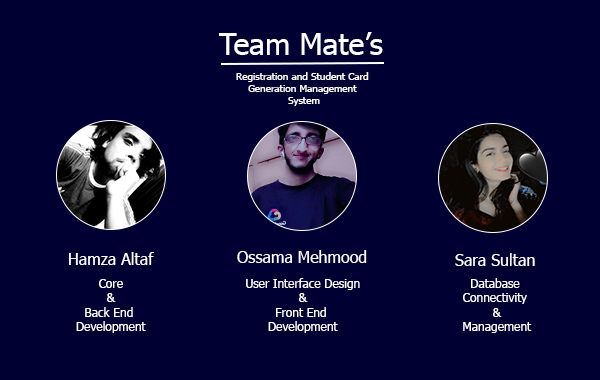
<style>
.page{position:relative;width:600px;height:380px;background:#000033}
.page>*{position:absolute;margin:0}
.t1{font:30px "Tahoma";color:#ffffff}
.t2{font:10px "Tahoma";color:#ffffff}
.t3{font:16px "Tahoma";color:#ffffff}
.t4{font:12px "Tahoma";color:#ffffff}
</style>
<div class="page">
<p class="t1" style="left:219px;top:32px;width:164px;height:23px">Team Mate’s</p>
<p class="t2" style="left:236px;top:72px;width:133px;height:34px;text-align:center">Registration and Student Card <br>Generation Management <br>System</p>
<p class="t3" style="left:69px;top:252px;width:85px;height:13px">Hamza Altaf</p>
<p class="t3" style="left:237px;top:250px;width:130px;height:13px">Ossama Mehmood</p>
<p class="t3" style="left:455px;top:253px;width:80px;height:13px">Sara Sultan</p>
<p class="t4" style="left:76px;top:279px;width:70px;height:54px;text-align:center">Core<br>&amp;<br>Back End <br>Development</p>
<p class="t4" style="left:246px;top:278px;width:114px;height:55px;text-align:center">User Interface Design<br>&amp;<br>Front End <br>Development</p>
<p class="t4" style="left:463px;top:278px;width:69px;height:55px;text-align:center">Database <br>Connectivity <br>&amp;<br>Management</p>
</div>
